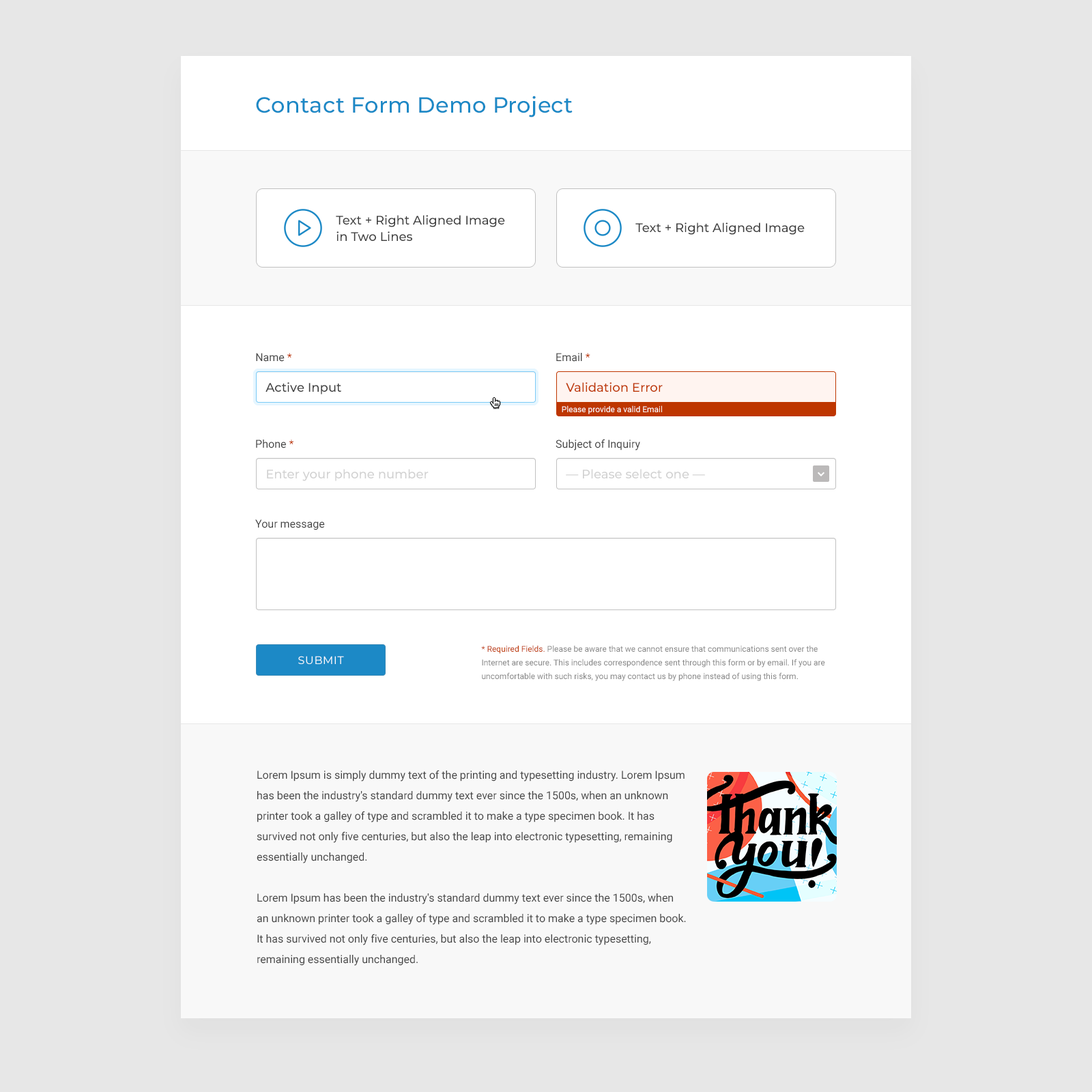
<style>
.page{position:relative;width:1092px;height:1092px;background:#e7e7e7}
.page>*{position:absolute;margin:0}
.t1{font:21.8px "Montserrat-Medium";letter-spacing:0.01em;color:#1c89c6}
.t2{font:12.3px/16.4px "Montserrat-Medium";color:#3c3c3c}
.t3{font:12.3px "Montserrat-Medium";color:#3c3c3c}
.t4{font:10.9px "Roboto-Regular";color:#444444}
.t5{font:10.9px "Roboto-Regular";color:#be3600}
.t6{font:12.3px "Montserrat-Medium";color:#be3600}
.t7{font:8.2px "Roboto-Regular";color:#ffffff}
.t8{font:12.3px "Montserrat-Medium";color:#d1d1d1}
.t9{font:8.2px/13.6px "Roboto-Regular";color:#858585}
.t10{font:8.2px/13.6px "Roboto-Regular";color:#be3600}
.t11{font:10.9px "Montserrat-Regular";letter-spacing:0.04em;color:#ffffff;text-transform:uppercase}
.t12{font:10.9px/20.5px "Roboto-Regular";color:#444444}
</style>
<div class="page">
<p class="t1" style="left:256px;top:96px;width:317px;height:21px">Contact Form Demo Project</p>
<p class="t2" style="left:336px;top:215px;width:169px;height:26px">Text + Right Aligned Image<br>in Two Lines</p>
<p class="t3" style="left:635px;top:222px;width:170px;height:13px">Text + Right Aligned Image</p>
<p class="t4" style="left:256px;top:353px;width:36px;height:9px">Name<span class="t5"> *</span></p>
<p class="t4" style="left:556px;top:353px;width:34px;height:9px">Email<span class="t5"> *</span></p>
<p class="t3" style="left:265px;top:382px;width:76px;height:12px">Active Input</p>
<p class="t6" style="left:566px;top:382px;width:97px;height:10px">Validation Error</p>
<p class="t7" style="left:562px;top:405px;width:100px;height:9px">Please provide a valid Email</p>
<p class="t4" style="left:256px;top:440px;width:38px;height:8px">Phone<span class="t5"> *</span></p>
<p class="t4" style="left:556px;top:439px;width:84px;height:11px">Subject of Inquiry</p>
<p class="t8" style="left:267px;top:469px;width:162px;height:12px">Enter your phone number</p>
<p class="t8" style="left:566px;top:469px;width:139px;height:9px">— Please select one —</p>
<p class="t4" style="left:255px;top:519px;width:70px;height:11px">Your message</p>
<p class="t9" style="left:481px;top:645px;width:344px;height:36px"><span class="t10">* Required Fields. </span>Please be aware that we cannot ensure that communications sent over the<br>Internet are secure. This includes correspondence sent through this form or by email. If you are<br>uncomfortable with such risks, you may contact us by phone instead of using this form.</p>
<p class="t11" style="left:298px;top:656px;width:46px;height:8px">Submit</p>
<p class="t12" style="left:257px;top:770px;width:429px;height:196px">Lorem Ipsum is simply dummy text of the printing and typesetting industry. Lorem Ipsum has been the industry's standard dummy text ever since the 1500s, when an unknown printer took a galley of type and scrambled it to make a type specimen book. It has survived not only five centuries, but also the leap into electronic typesetting, remaining essentially unchanged.<br><br>Lorem Ipsum has been the industry's standard dummy text ever since the 1500s, when an unknown printer took a galley of type and scrambled it to make a type specimen book. It has survived not only five centuries, but also the leap into electronic typesetting, remaining essentially unchanged.</p>
</div>
